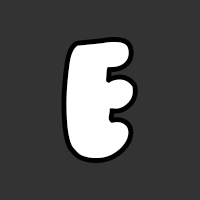
<style>
.page{position:relative;width:200px;height:200px;background:#333333}
.page>*{position:absolute;margin:0}
.t1{font:150px "BubbleGum";color:#ffffff}
</style>
<div class="page">
<p class="t1" style="left:66px;top:42px;width:67px;height:116px">E</p>
</div>
